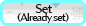
<style>
.page{position:relative;width:86px;height:26px;background:#77ffff}
.page>*{position:absolute;margin:0}
.t1{font:13.3px "AmiraParadiso";letter-spacing:-0.06em;color:#000000}
.t2{font:10.7px "AmiraParadiso";letter-spacing:-0.06em;color:#000000}
</style>
<div class="page">
<p class="t1" style="left:35px;top:4px;width:18px;height:9px;opacity:0.96">Set</p>
<p class="t2" style="left:17px;top:13px;width:52px;height:10px;opacity:0.96">(Already set)</p>
</div>
